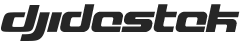
<style>
.page{position:relative;width:240px;height:45px;background:#ffffff}
.page>*{position:absolute;margin:0}
.t1{font:48px "Blaster-Italic";letter-spacing:-0.04em;color:#262626}
</style>
<div class="page">
<p class="t1" style="left:60px;top:4px;width:180px;height:28px">destek</p>
</div>
